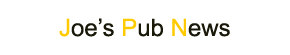
<style>
.page{position:relative;width:290px;height:55px;background:#ffffff}
.page>*{position:absolute;margin:0}
.t1{font:24px "ArialMT";color:#191809}
.t2{font:24px "ArialMT";color:#ffcc00}
</style>
<div class="page">
<p class="t1" style="left:59px;top:18px;width:171px;height:19px"><span class="t2">J</span>oe’s<span class="t2"> P</span>ub<span class="t2"> N</span>ews</p>
</div>
